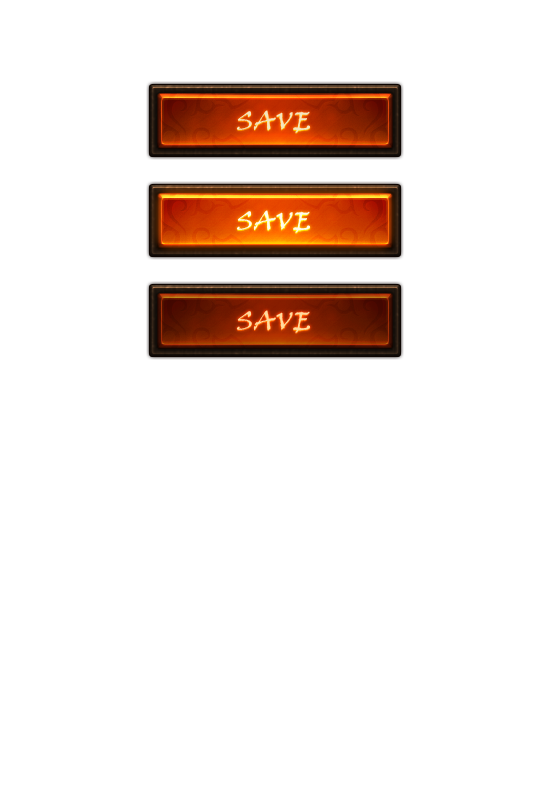
<style>
.page{position:relative;width:555px;height:800px;background:#ffffff}
.page>*{position:absolute;margin:0}
.t1{font:25px "VinerHandITC";letter-spacing:0.05em;color:#f4e5bf;text-transform:uppercase}
.t2{font:25px "VinerHandITC";letter-spacing:0.05em;color:#fffaed;text-transform:uppercase}
.t3{font:25px "VinerHandITC";letter-spacing:0.05em;color:#ffda9f;text-transform:uppercase}
</style>
<div class="page">
<p class="t1" style="left:236px;top:110px;width:75px;height:23px">SAve</p>
<p class="t2" style="left:236px;top:210px;width:75px;height:23px">Save</p>
<p class="t3" style="left:236px;top:310px;width:75px;height:23px">Save</p>
</div>
